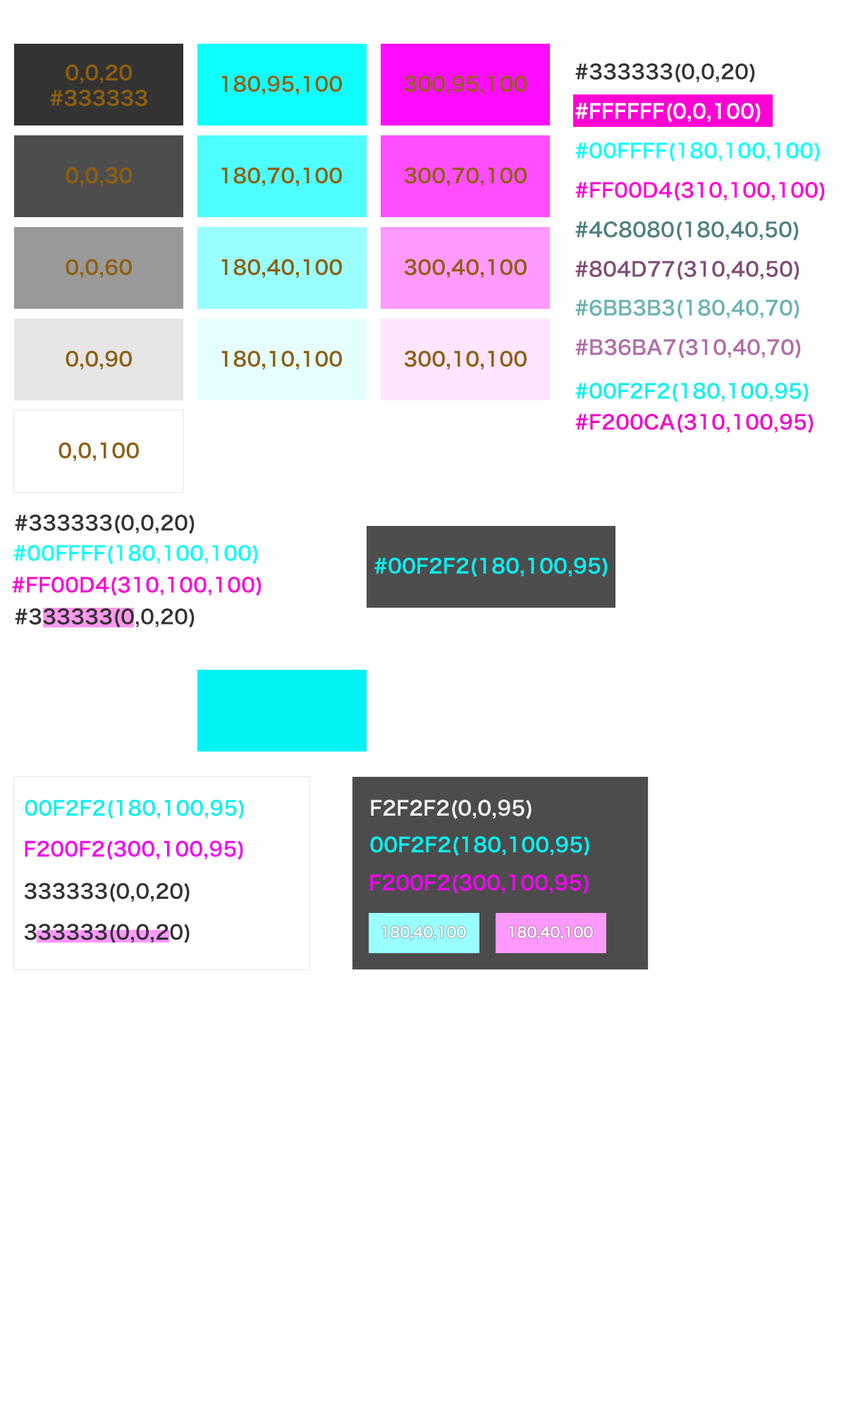
<style>
.page{position:relative;width:846px;height:1410px;background:#ffffff}
.page>*{position:absolute;margin:0}
.t1{font:19.7px/25.4px "HiraKakuPro-W6";color:#8f5f0b}
.t2{font:19.7px "HiraKakuPro-W6";color:#333333}
.t3{font:19.7px "HiraKakuPro-W6";color:#8f5f0b}
.t4{font:19.7px "HiraKakuPro-W6";color:#ffffff}
.t5{font:19.7px "HiraKakuPro-W6";color:#00ffff}
.t6{font:19.7px "HiraKakuPro-W6";color:#ff00d4}
.t7{font:19.7px "HiraKakuPro-W6";color:#4d8080}
.t8{font:19.7px "HiraKakuPro-W6";color:#804d77}
.t9{font:19.7px "HiraKakuPro-W6";color:#6bb3b3}
.t10{font:19.7px "HiraKakuPro-W6";color:#b36ba7}
.t11{font:19.7px "HiraKakuPro-W6";color:#00f2f2}
.t12{font:19.7px "HiraKakuPro-W6";color:#f200ca}
.t13{font:19.7px "HiraKakuPro-W6";color:#f2f2f2}
.t14{font:19.7px "HiraKakuPro-W6";color:#f200f2}
.t15{font:14.1px "HiraKakuPro-W6";color:#ffffff}
</style>
<div class="page">
<p class="t1" style="left:50px;top:64px;width:97px;height:42px;text-align:center">0,0,20<br>#333333</p>
<p class="t2" style="left:575px;top:63px;width:180px;height:20px">#333333(0,0,20)</p>
<p class="t3" style="left:221px;top:75px;width:121px;height:20px">180,95,100</p>
<p class="t3" style="left:404px;top:75px;width:123px;height:20px">300,95,100</p>
<p class="t4" style="left:575px;top:103px;width:186px;height:20px">#FFFFFF(0,0,100)</p>
<p class="t5" style="left:575px;top:142px;width:245px;height:20px">#00FFFF(180,100,100)</p>
<p class="t3" style="left:66px;top:167px;width:66px;height:20px">0,0,30</p>
<p class="t3" style="left:221px;top:167px;width:121px;height:20px">180,70,100</p>
<p class="t3" style="left:404px;top:167px;width:123px;height:20px">300,70,100</p>
<p class="t6" style="left:575px;top:181px;width:250px;height:21px">#FF00D4(310,100,100)</p>
<p class="t7" style="left:575px;top:221px;width:224px;height:20px">#4C8080(180,40,50)</p>
<p class="t3" style="left:66px;top:259px;width:66px;height:19px">0,0,60</p>
<p class="t3" style="left:221px;top:259px;width:121px;height:19px">180,40,100</p>
<p class="t3" style="left:404px;top:259px;width:123px;height:19px">300,40,100</p>
<p class="t8" style="left:575px;top:260px;width:224px;height:21px">#804D77(310,40,50)</p>
<p class="t9" style="left:575px;top:299px;width:224px;height:20px">#6BB3B3(180,40,70)</p>
<p class="t10" style="left:575px;top:338px;width:226px;height:21px">#B36BA7(310,40,70)</p>
<p class="t3" style="left:66px;top:350px;width:66px;height:20px">0,0,90</p>
<p class="t3" style="left:221px;top:350px;width:121px;height:20px">180,10,100</p>
<p class="t3" style="left:404px;top:350px;width:123px;height:20px">300,10,100</p>
<p class="t11" style="left:575px;top:382px;width:233px;height:20px">#00F2F2(180,100,95)</p>
<p class="t12" style="left:575px;top:413px;width:238px;height:20px">#F200CA(310,100,95)</p>
<p class="t3" style="left:59px;top:442px;width:80px;height:20px">0,0,100</p>
<p class="t2" style="left:15px;top:514px;width:180px;height:20px">#333333(0,0,20)</p>
<p class="t5" style="left:13px;top:544px;width:245px;height:21px">#00FFFF(180,100,100)</p>
<p class="t11" style="left:374px;top:557px;width:234px;height:20px">#00F2F2(180,100,95)</p>
<p class="t6" style="left:12px;top:576px;width:250px;height:20px">#FF00D4(310,100,100)</p>
<p class="t2" style="left:15px;top:608px;width:180px;height:20px">#333333(0,0,20)</p>
<p class="t11" style="left:25px;top:799px;width:219px;height:20px">00F2F2(180,100,95)</p>
<p class="t13" style="left:371px;top:799px;width:160px;height:20px">F2F2F2(0,0,95)</p>
<p class="t14" style="left:25px;top:840px;width:218px;height:20px">F200F2(300,100,95)</p>
<p class="t11" style="left:370px;top:836px;width:219px;height:20px">00F2F2(180,100,95)</p>
<p class="t14" style="left:370px;top:874px;width:219px;height:20px">F200F2(300,100,95)</p>
<p class="t2" style="left:24px;top:883px;width:166px;height:19px">333333(0,0,20)</p>
<p class="t2" style="left:24px;top:923px;width:166px;height:20px">333333(0,0,20)</p>
<p class="t15" style="left:382px;top:925px;width:84px;height:15px">180,40,100</p>
<p class="t15" style="left:509px;top:925px;width:84px;height:15px">180,40,100</p>
</div>
